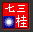
<style>
.page{position:relative;width:33px;height:32px;background:#f20000}
.page>*{position:absolute;margin:0}
.t1{font:10.4px "SimSun";color:#ffffff}
.t2{font:11.7px "SimSun";color:#ffffff}
</style>
<div class="page">
<p class="t1" style="left:5px;top:4px;width:20px;height:8px">七三</p>
<p class="t2" style="left:16px;top:15px;width:11px;height:12px">桂</p>
</div>
